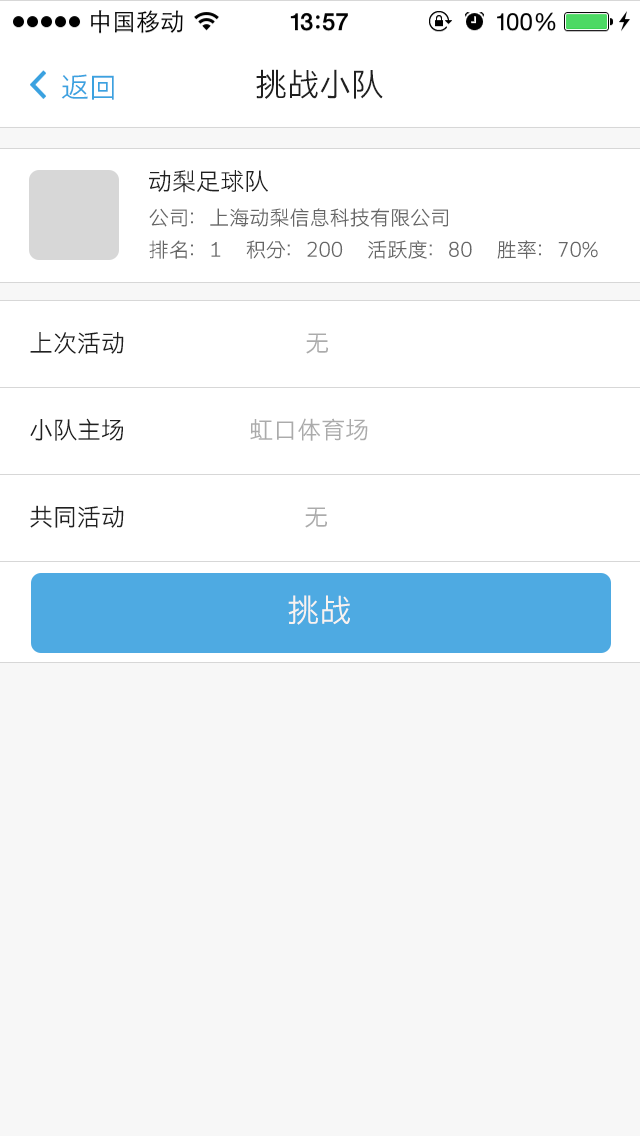
<style>
.page{position:relative;width:640px;height:1136px;background:#f7f7f7}
.page>*{position:absolute;margin:0}
.t1{font:28px "STHeitiSC-Light";color:#3ba2e0}
.t2{font:32px "STHeitiSC-Light";color:#202020}
.t3{font:24px "STHeitiSC-Light";color:#202020}
.t4{font:20px "STHeitiSC-Light";color:#666666}
.t5{font:24px "STHeitiSC-Light";color:#ababab}
.t6{font:32px "STHeitiSC-Light";color:#f8f3f0}
</style>
<div class="page">
<p class="t1" style="left:61px;top:74px;width:53px;height:26px">返回</p>
<p class="t2" style="left:256px;top:69px;width:127px;height:30px">挑战小队</p>
<p class="t3" style="left:149px;top:170px;width:119px;height:23px">动梨足球队</p>
<p class="t4" style="left:149px;top:208px;width:299px;height:19px">公司：上海动梨信息科技有限公司</p>
<p class="t4" style="left:149px;top:240px;width:449px;height:19px">排名：1      积分：200      活跃度：80      胜率：70%</p>
<p class="t3" style="left:30px;top:332px;width:94px;height:22px">上次活动</p>
<p class="t5" style="left:306px;top:333px;width:22px;height:21px">无</p>
<p class="t3" style="left:30px;top:418px;width:93px;height:23px">小队主场</p>
<p class="t5" style="left:250px;top:418px;width:118px;height:23px">虹口体育场</p>
<p class="t3" style="left:30px;top:505px;width:94px;height:23px">共同活动</p>
<p class="t5" style="left:305px;top:507px;width:22px;height:21px">无</p>
<p class="t6" style="left:288px;top:595px;width:62px;height:30px">挑战</p>
</div>
